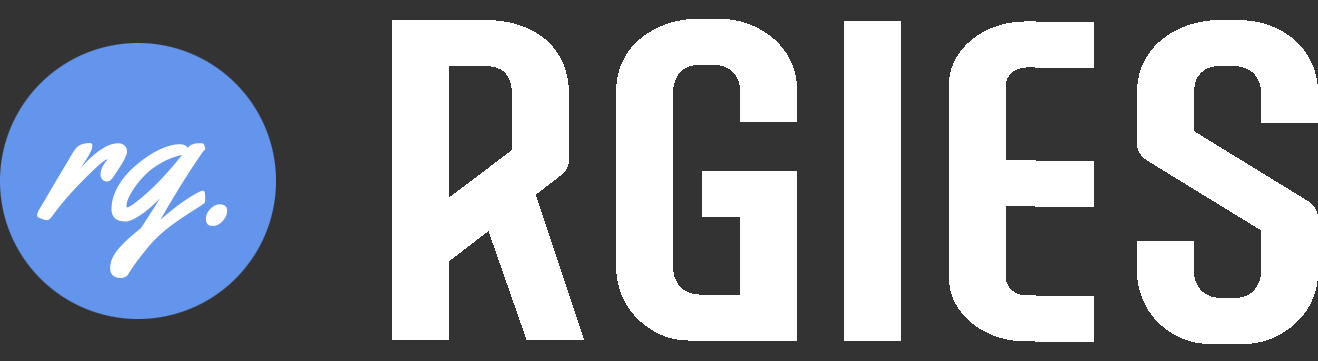
<style>
.page{position:relative;width:1318px;height:361px;background:#333333}
.page>*{position:absolute;margin:0}
.t1{font:375px "BROOKLINE-Condensed";color:#ffffff;scale:1.25 1}
</style>
<div class="page">
<p class="t1" style="left:392px;top:19px;width:926px;height:325px">RGIES</p>
</div>
